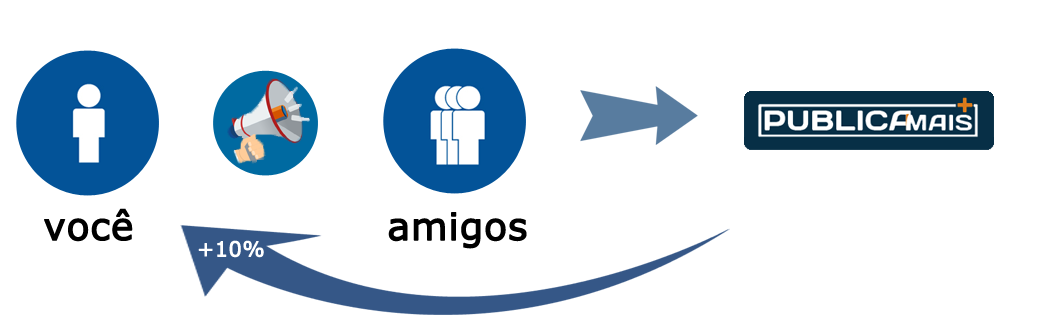
<style>
.page{position:relative;width:1039px;height:333px;background:#ffffff}
.page>*{position:absolute;margin:0}
.t1{font:37.5px "Verdana";color:#000000;font-weight:bold}
.t2{font:20.8px "Verdana";color:#ffffff;font-weight:bold}
</style>
<div class="page">
<p class="t1" style="left:44px;top:208px;width:89px;height:34px">você</p>
<p class="t1" style="left:388px;top:212px;width:139px;height:37px">amigos</p>
<p class="t2" style="left:198px;top:240px;width:66px;height:18px">+10%</p>
</div>
